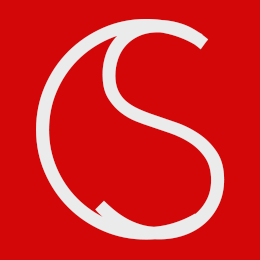
<style>
.page{position:relative;width:260px;height:260px;background:#d30707}
.page>*{position:absolute;margin:0}
.t1{font:308.3px "JosefinSans";letter-spacing:-0.48em;color:#ebebeb}
</style>
<div class="page">
<p class="t1" style="left:36px;top:19px;width:189px;height:221px">CS</p>
</div>
